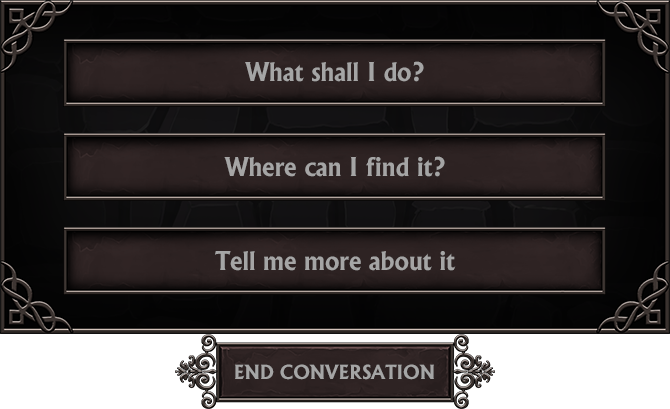
<style>
.page{position:relative;width:670px;height:409px}
.page>*{position:absolute;margin:0}
.t1{font:24.9px "AlbertusBold-Regular";color:#a5a5a5}
.t2{font:18.7px "AlbertusBold-Regular";color:#a5a5a5}
</style>
<div class="page">
<p class="t1" style="left:245px;top:61px;width:179px;height:21px">What shall I do?</p>
<p class="t1" style="left:224px;top:156px;width:221px;height:21px">Where can I find it?</p>
<p class="t1" style="left:215px;top:251px;width:241px;height:20px">Tell me more about it</p>
<p class="t2" style="left:235px;top:364px;width:199px;height:16px">END CONVERSATION</p>
</div>
